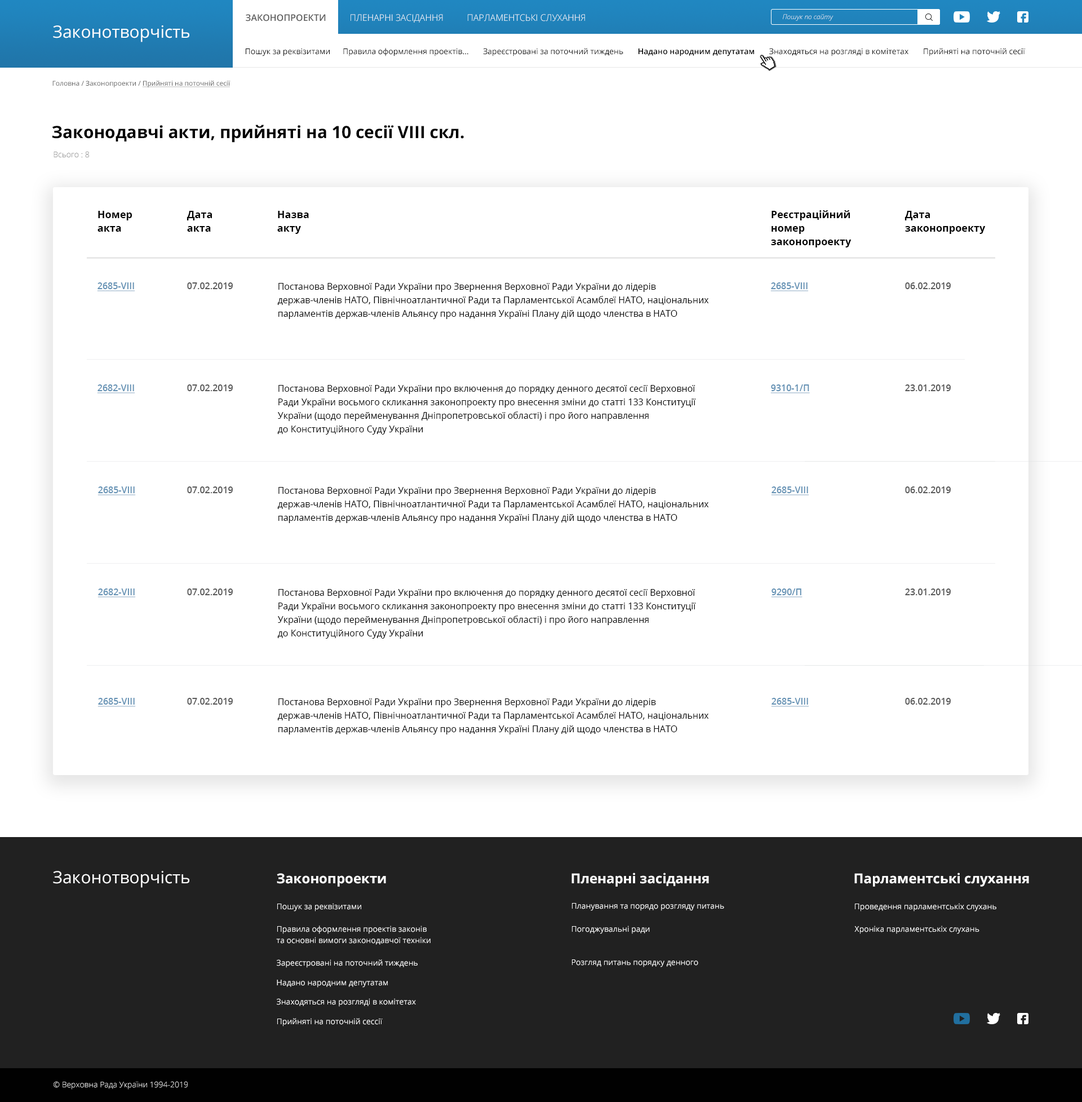
<style>
.page{position:relative;width:1082px;height:1102px;background:#ffffff}
.page>*{position:absolute;margin:0}
.t1{font:9px "OpenSans-SemiBold";color:#585858;text-transform:uppercase}
.t2{font:9px "OpenSans-Light";color:#ffffff;text-transform:uppercase}
.t3{font:6.8px "OpenSans-LightItalic";color:#ffffff}
.t4{font:16.9px "OpenSans-Regular";color:#ffffff}
.t5{font:7.9px "OpenSans-Regular";color:#000000}
.t6{font:7.9px "OpenSans-SemiBold";color:#000000}
.t7{font:6.8px "OpenSans-Regular";color:#585858;text-decoration:underline}
.t8{font:6.8px "OpenSans-Regular";color:#585858}
.t9{font:16.9px "OpenSans-Bold";color:#000000}
.t10{font:7.9px "OpenSans-Light"}
.t11{font:10.1px/13.5px "OpenSans-Bold";color:#000000}
.t12{font:9px "OpenSans-SemiBold";color:#6592b5;text-decoration:underline}
.t13{font:9px "OpenSans-SemiBold";color:#585858}
.t14{font:9px/13.5px "OpenSans-Regular";color:#000000}
.t15{font:13.5px "OpenSans-Bold";color:#ffffff}
.t16{font:7.9px "OpenSans-Regular";color:#ffffff}
.t17{font:7.9px/11.3px "OpenSans-Regular";color:#ffffff}
.t18{font:7.9px/14.7px "OpenSans-Regular";color:#ffffff}
.t19{font:7.9px "OpenSans-Light";color:#ffffff}
</style>
<div class="page">
<p class="t1" style="left:246px;top:14px;width:80px;height:7px">Законопроекти</p>
<p class="t2" style="left:351px;top:14px;width:92px;height:9px">пленарні засідання</p>
<p class="t2" style="left:468px;top:14px;width:117px;height:7px">парламентські слухання</p>
<p class="t3" style="left:783px;top:14px;width:51px;height:7px">Пошук по сайту</p>
<p class="t4" style="left:53px;top:25px;width:136px;height:17px">Законотворчість</p>
<p class="t5" style="left:246px;top:48px;width:779px;height:8px">Пошук за реквізитами      Правила оформлення проектів...       Зареєстровані за поточний тиждень       <span class="t6">Надано народним депутатам</span>       Знаходяться на розгляді в комітетах       Прийняті на поточній сесії</p>
<p class="t7" style="left:52px;top:81px;width:179px;height:6px"><span class="t8">Головна / Законопроекти / </span>Прийняті на поточній сесії</p>
<p class="t9" style="left:52px;top:125px;width:412px;height:18px">Законодавчі акти, прийняті на 10 сесії VIII скл.</p>
<p class="t10" style="left:54px;top:151px;width:35px;height:7px">Всього : 8</p>
<p class="t11" style="left:98px;top:211px;width:34px;height:21px">Номер<br>акта</p>
<p class="t11" style="left:187px;top:211px;width:25px;height:21px">Дата<br>акта</p>
<p class="t11" style="left:277px;top:211px;width:32px;height:23px">Назва<br>акту</p>
<p class="t11" style="left:771px;top:210px;width:81px;height:37px">Реєстраційний<br>номер<br>законопроекту</p>
<p class="t11" style="left:905px;top:211px;width:81px;height:23px">Дата<br>законопроекту</p>
<p class="t12" style="left:97px;top:282px;width:38px;height:9px">2685-VIII</p>
<p class="t13" style="left:187px;top:282px;width:46px;height:7px">07.02.2019</p>
<p class="t14" style="left:277px;top:283px;width:432px;height:36px">Постанова Верховної Ради України про Звернення Верховної Ради України до лідерів держав-членів НАТО, Північноатлантичної Ради та Парламентської Асамблеї НАТО, національних парламентів держав-членів Альянсу про надання Україні Плану дій щодо членства в НАТО</p>
<p class="t12" style="left:770px;top:282px;width:39px;height:9px">2685-VIII</p>
<p class="t13" style="left:905px;top:282px;width:46px;height:7px">06.02.2019</p>
<p class="t12" style="left:97px;top:384px;width:38px;height:9px">2682-VIII</p>
<p class="t13" style="left:187px;top:384px;width:46px;height:7px">07.02.2019</p>
<p class="t14" style="left:277px;top:385px;width:419px;height:50px">Постанова Верховної Ради України про включення до порядку денного десятої сесії Верховної Ради України восьмого скликання законопроекту про внесення зміни до статті 133 Конституції України (щодо перейменування Дніпропетровської області) і про його направлення <br>до Конституційного Суду України</p>
<p class="t12" style="left:770px;top:384px;width:40px;height:9px">9310-1/П</p>
<p class="t13" style="left:905px;top:384px;width:46px;height:7px">23.01.2019</p>
<p class="t12" style="left:98px;top:486px;width:38px;height:9px">2685-VIII</p>
<p class="t13" style="left:187px;top:486px;width:46px;height:7px">07.02.2019</p>
<p class="t14" style="left:277px;top:487px;width:432px;height:36px">Постанова Верховної Ради України про Звернення Верховної Ради України до лідерів держав-членів НАТО, Північноатлантичної Ради та Парламентської Асамблеї НАТО, національних парламентів держав-членів Альянсу про надання Україні Плану дій щодо членства в НАТО</p>
<p class="t12" style="left:771px;top:486px;width:38px;height:9px">2685-VIII</p>
<p class="t13" style="left:905px;top:486px;width:46px;height:7px">06.02.2019</p>
<p class="t12" style="left:98px;top:588px;width:38px;height:9px">2682-VIII</p>
<p class="t13" style="left:187px;top:588px;width:46px;height:7px">07.02.2019</p>
<p class="t14" style="left:277px;top:589px;width:419px;height:50px">Постанова Верховної Ради України про включення до порядку денного десятої сесії Верховної Ради України восьмого скликання законопроекту про внесення зміни до статті 133 Конституції України (щодо перейменування Дніпропетровської області) і про його направлення <br>до Конституційного Суду України</p>
<p class="t12" style="left:771px;top:588px;width:32px;height:9px">9290/П</p>
<p class="t13" style="left:905px;top:588px;width:46px;height:7px">23.01.2019</p>
<p class="t12" style="left:98px;top:698px;width:38px;height:9px">2685-VIII</p>
<p class="t13" style="left:187px;top:698px;width:46px;height:7px">07.02.2019</p>
<p class="t14" style="left:277px;top:698px;width:432px;height:36px">Постанова Верховної Ради України про Звернення Верховної Ради України до лідерів держав-членів НАТО, Північноатлантичної Ради та Парламентської Асамблеї НАТО, національних парламентів держав-членів Альянсу про надання Україні Плану дій щодо членства в НАТО</p>
<p class="t12" style="left:771px;top:698px;width:38px;height:9px">2685-VIII</p>
<p class="t13" style="left:905px;top:698px;width:46px;height:7px">06.02.2019</p>
<p class="t4" style="left:53px;top:871px;width:136px;height:17px">Законотворчість</p>
<p class="t15" style="left:277px;top:873px;width:109px;height:14px">Законопроекти</p>
<p class="t15" style="left:572px;top:872px;width:137px;height:15px">Пленарні засідання</p>
<p class="t15" style="left:854px;top:872px;width:175px;height:15px">Парламентські слухання</p>
<p class="t16" style="left:277px;top:903px;width:84px;height:8px">Пошук за реквізитами</p>
<p class="t16" style="left:572px;top:903px;width:152px;height:8px">Планування та порядо розгляду питань</p>
<p class="t16" style="left:855px;top:903px;width:141px;height:8px">Проведення парламентськіх слухань</p>
<p class="t17" style="left:276px;top:925px;width:155px;height:20px"><span class="t18">Правила оформлення проектів законів<br></span>та основні вимоги законодавчої техніки</p>
<p class="t16" style="left:572px;top:925px;width:78px;height:9px">Погоджувальні ради</p>
<p class="t16" style="left:854px;top:925px;width:126px;height:9px">Хроніка парламентськіх слухань</p>
<p class="t16" style="left:277px;top:959px;width:141px;height:9px">Зареєстровані на поточний тиждень</p>
<p class="t16" style="left:572px;top:959px;width:126px;height:8px">Розгляд питань порядку денного</p>
<p class="t16" style="left:277px;top:980px;width:111px;height:7px">Надано народним депутатам</p>
<p class="t16" style="left:277px;top:998px;width:139px;height:9px">Знаходяться на розгляді в комітетах</p>
<p class="t16" style="left:277px;top:1018px;width:106px;height:8px">Прийняті на поточній сессії</p>
<p class="t19" style="left:54px;top:1081px;width:134px;height:8px">© Верховна Рада України 1994-2019</p>
</div>
